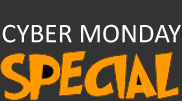
<style>
.page{position:relative;width:182px;height:101px;background:#333333}
.page>*{position:absolute;margin:0}
.t1{font:27.2px "Calibri";color:#ffffff}
</style>
<div class="page">
<p class="t1" style="left:2px;top:24px;width:179px;height:19px">CYBER MONDAY</p>
</div>
